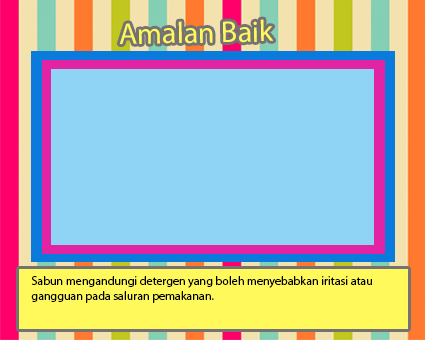
<style>
.page{position:relative;width:425px;height:340px;background:#8fd3f5}
.page>*{position:absolute;margin:0}
.t1{font:30px "MyriadPro-Regular";color:#fff95b}
.t2{font:12px "MyriadPro-Regular";color:#000000}
</style>
<div class="page">
<p class="t1" style="left:119px;top:19px;width:155px;height:25px;rotate:-1deg">Amalan Baik</p>
<p class="t2" style="left:31px;top:276px;width:341px;height:27px">Sabun mengandungi detergen yang boleh menyebabkan iritasi atau <br>gangguan pada saluran pemakanan.</p>
</div>
